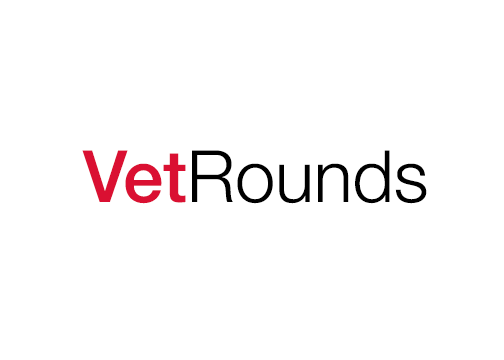
<style>
.page{position:relative;width:504px;height:360px;background:#ffffff}
.page>*{position:absolute;margin:0}
.t1{font:72px "HelveticaNeue-Light";color:#000000}
.t2{font:72px "HelveticaNeue-Medium";color:#da1032}
</style>
<div class="page">
<p class="t1" style="left:82px;top:150px;width:345px;height:54px"><span class="t2">Vet</span>Rounds</p>
</div>
